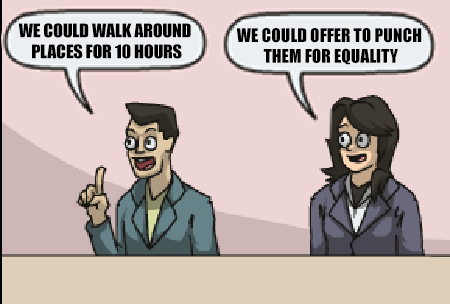
<style>
.page{position:relative;width:450px;height:304px;background:#eed5d5}
.page>*{position:absolute;margin:0}
.t1{font:13px "Impact";color:#000000}
</style>
<div class="page">
<p class="t1" style="left:18px;top:23px;width:173px;height:36px;text-align:center">WE COULD WALK AROUND <br>PLACES FOR 10 HOURS</p>
<p class="t1" style="left:236px;top:28px;width:186px;height:37px;text-align:center">WE COULD OFFER TO PUNCH <br>THEM FOR EQUALITY</p>
</div>
